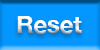
<style>
.page{position:relative;width:100px;height:50px;background:#0397ff}
.page>*{position:absolute;margin:0}
.t1{font:24px "HelveticaNeue-Bold"}
</style>
<div class="page">
<p class="t1" style="left:17px;top:16px;width:65px;height:18px">Reset</p>
</div>
